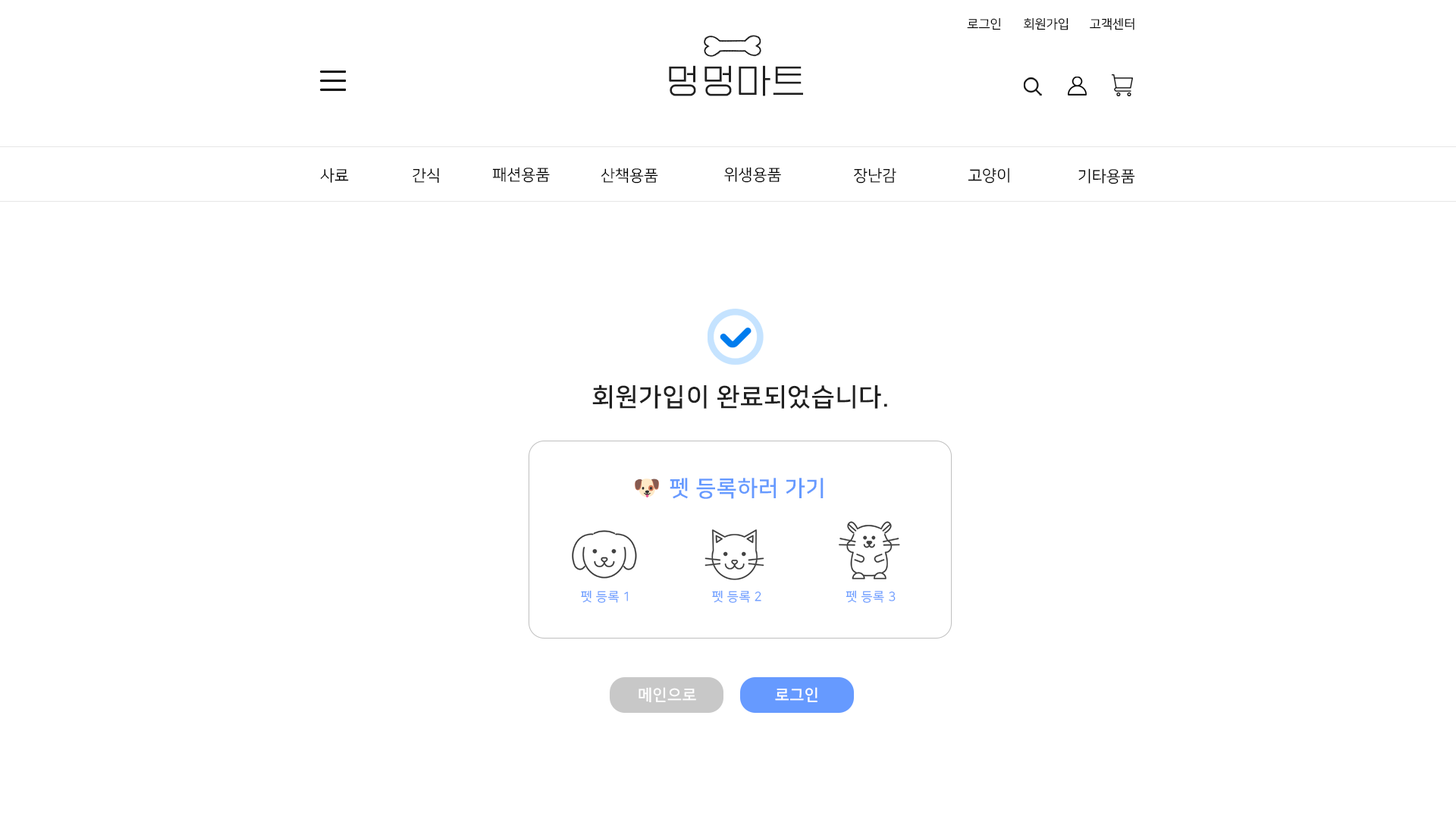
<style>
.page{position:relative;width:1456px;height:819px;background:#ffffff}
.page>*{position:absolute;margin:0}
.t1{font:12.6px "NanumSquareR";color:#000000}
.t2{font:34.8px "EF_watermelonSalad";letter-spacing:0.025em;color:#202020}
.t3{font:15.8px "NanumSquareR";color:#000000}
.t4{font:25.3px "NanumSquareB";letter-spacing:0.025em;color:#202020}
.t5{font:12.6px "NanumSquareR";letter-spacing:0.025em;color:#669aff}
.t6{font:15.8px "NanumSquareB";letter-spacing:0.025em;color:#ffffff}
</style>
<div class="page">
<p class="t1" style="left:967px;top:17px;width:34px;height:13px">로그인</p>
<p class="t1" style="left:1024px;top:17px;width:44px;height:13px">회원가입</p>
<p class="t1" style="left:1090px;top:17px;width:44px;height:13px">고객센터</p>
<p class="t2" style="left:669px;top:65px;width:134px;height:31px">멍멍마트</p>
<p class="t3" style="left:320px;top:168px;width:29px;height:15px">사료</p>
<p class="t3" style="left:413px;top:168px;width:26px;height:16px">간식</p>
<p class="t3" style="left:492px;top:167px;width:58px;height:16px">패션용품</p>
<p class="t3" style="left:601px;top:168px;width:57px;height:16px">산책용품</p>
<p class="t3" style="left:724px;top:167px;width:57px;height:16px">위생용품</p>
<p class="t3" style="left:854px;top:168px;width:42px;height:16px">장난감</p>
<p class="t3" style="left:968px;top:168px;width:41px;height:16px">고양이</p>
<p class="t3" style="left:1078px;top:168px;width:57px;height:16px">기타용품</p>
<p class="t4" style="left:592px;top:384px;width:295px;height:25px">회원가입이 완료되었습니다.</p>
<p class="t5" style="left:581px;top:590px;width:47px;height:13px">펫 등록 1</p>
<p class="t5" style="left:712px;top:590px;width:49px;height:13px">펫 등록 2</p>
<p class="t5" style="left:846px;top:590px;width:50px;height:13px">펫 등록 3</p>
<p class="t6" style="left:639px;top:687px;width:57px;height:16px">메인으로</p>
<p class="t6" style="left:775px;top:687px;width:42px;height:15px">로그인</p>
</div>
